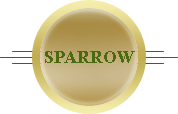
<style>
.page{position:relative;width:178px;height:114px;background:#ffffff}
.page>*{position:absolute;margin:0}
.t1{font:18px "TimesNewRomanPS-BoldMT";color:#4b6a0f}
</style>
<div class="page">
<p class="t1" style="left:45px;top:51px;width:90px;height:12px">SPARROW</p>
</div>
